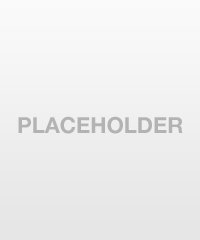
<style>
.page{position:relative;width:200px;height:240px}
.page>*{position:absolute;margin:0}
.t1{font:22px "HelveticaNeue-Bold";color:#b3b3b3}
</style>
<div class="page">
<p class="t1" style="left:18px;top:116px;width:165px;height:18px">PLACEHOLDER</p>
</div>
